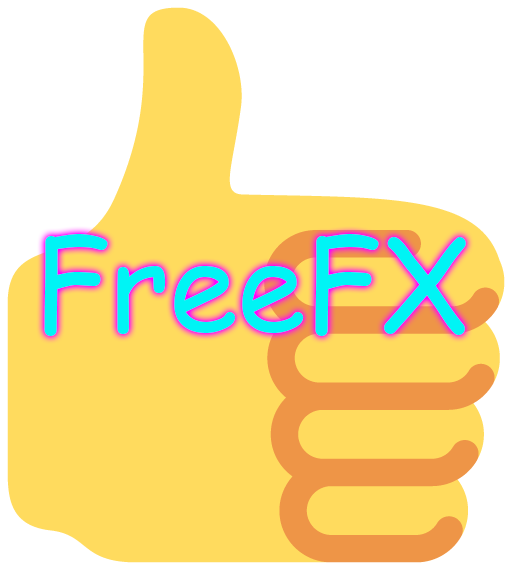
<style>
.page{position:relative;width:512px;height:570px;background:#ffdb5e}
.page>*{position:absolute;margin:0}
.t1{font:125px "ComicSansMS";letter-spacing:-0.004em;color:#00f4f5}
</style>
<div class="page">
<p class="t1" style="left:44px;top:234px;width:422px;height:102px">FreeFX</p>
</div>
